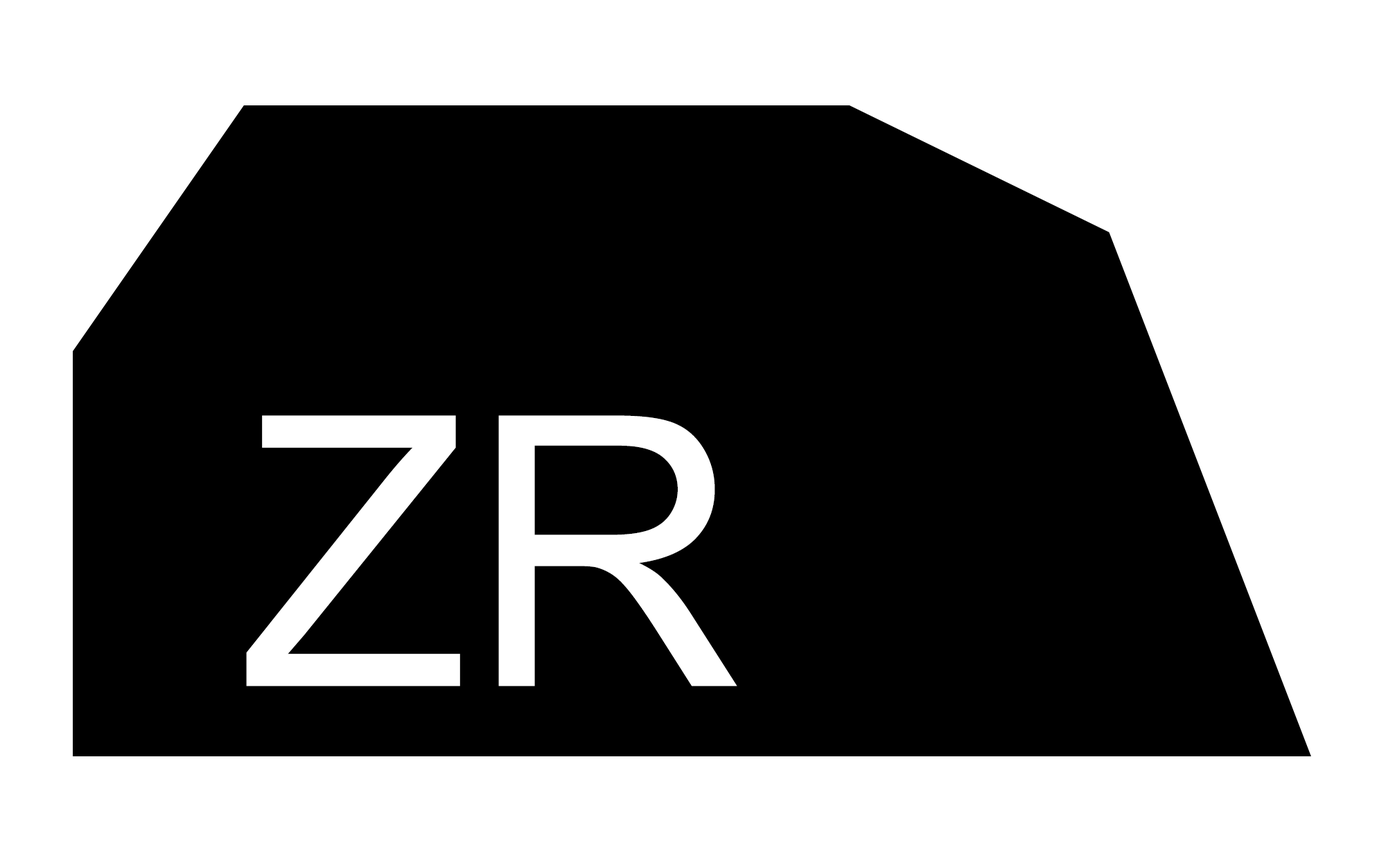
<style>
.page{position:relative;width:1386px;height:861px;background:#000000}
.page>*{position:absolute;margin:0}
.t1{font:377.1px "ArialMT";color:#ffffff}
</style>
<div class="page">
<p class="t1" style="left:246px;top:415px;width:491px;height:271px">ZR</p>
</div>
